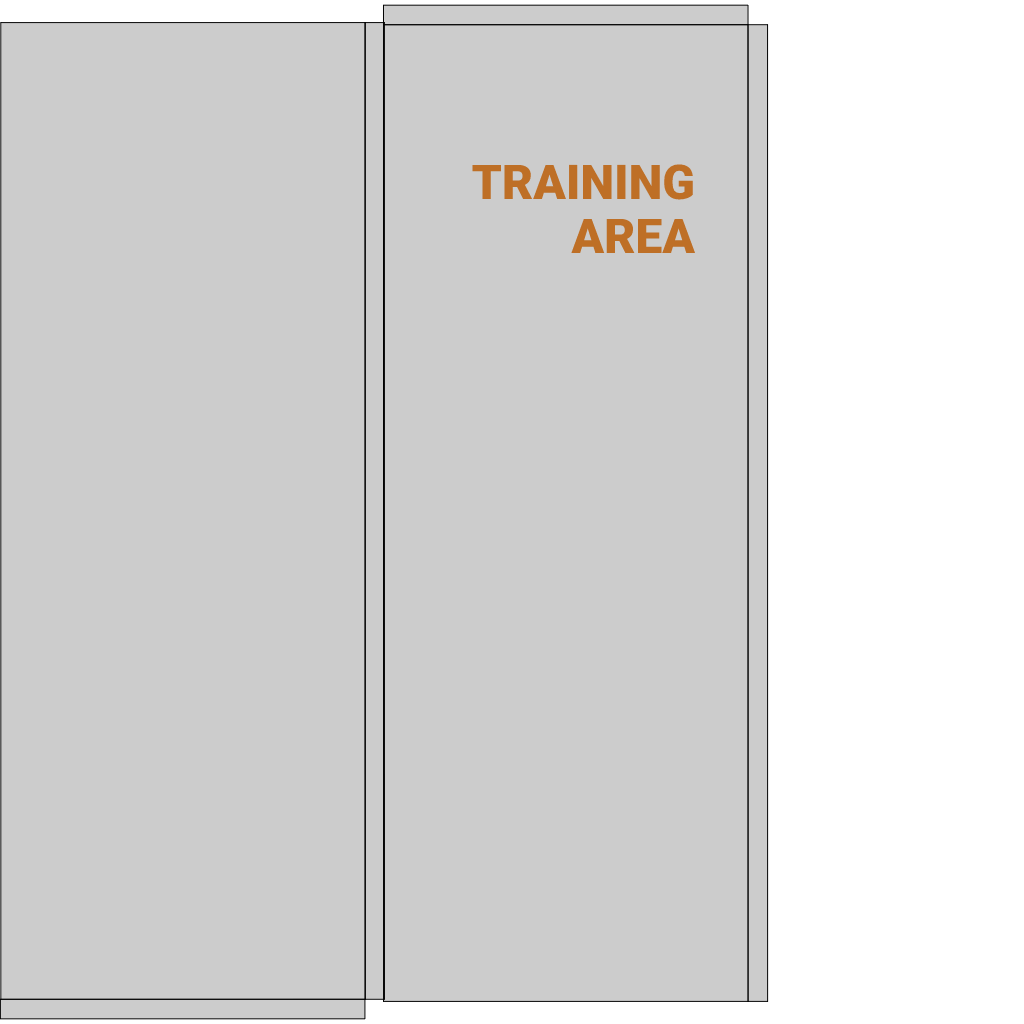
<style>
.page{position:relative;width:1024px;height:1024px;background:#cccccc}
.page>*{position:absolute;margin:0}
.t1{font:48px "Roboto-Black";color:#be6f26}
</style>
<div class="page">
<p class="t1" style="left:472px;top:164px;width:224px;height:89px;text-align:right">TRAINING <br>AREA</p>
</div>
